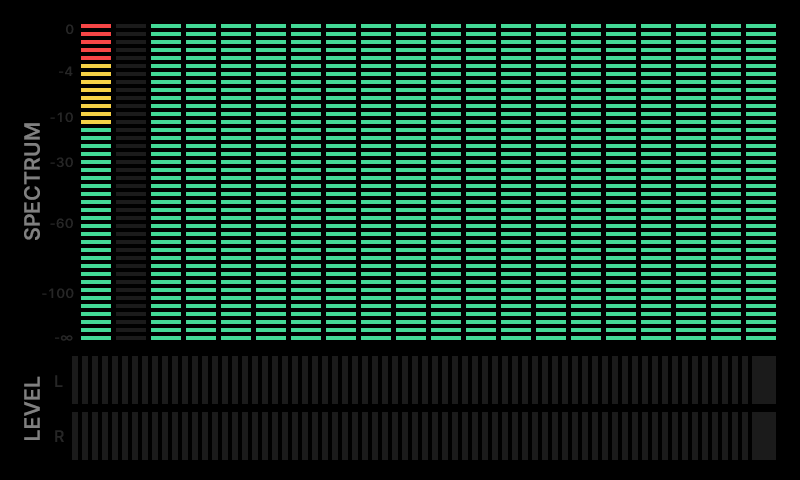
<style>
.page{position:relative;width:800px;height:480px;background:#000000}
.page>*{position:absolute;margin:0}
.t1{font:13.3px "Sarasa-UI-J-Semibold";color:#262626}
.t2{font:21.3px "Sarasa-UI-J-Semibold";color:#808080}
.t3{font:16px "Sarasa-UI-J-Semibold";color:#262626}
</style>
<div class="page">
<p class="t1" style="left:66px;top:24px;width:8px;height:11px">0</p>
<p class="t1" style="left:59px;top:66px;width:14px;height:10px">-4</p>
<p class="t1" style="left:50px;top:112px;width:23px;height:11px">-10</p>
<p class="t2" style="left:24px;top:123px;width:16px;height:117px;rotate:-90deg">SPECTRUM</p>
<p class="t1" style="left:50px;top:157px;width:23px;height:11px">-30</p>
<p class="t1" style="left:50px;top:218px;width:23px;height:11px">-60</p>
<p class="t1" style="left:42px;top:288px;width:32px;height:11px">-100</p>
<p class="t1" style="left:55px;top:335px;width:18px;height:6px">-∞</p>
<p class="t2" style="left:24px;top:376px;width:16px;height:64px;rotate:-90deg">LEVEL</p>
<p class="t3" style="left:55px;top:375px;width:8px;height:12px">L</p>
<p class="t3" style="left:55px;top:430px;width:9px;height:12px">R</p>
</div>
